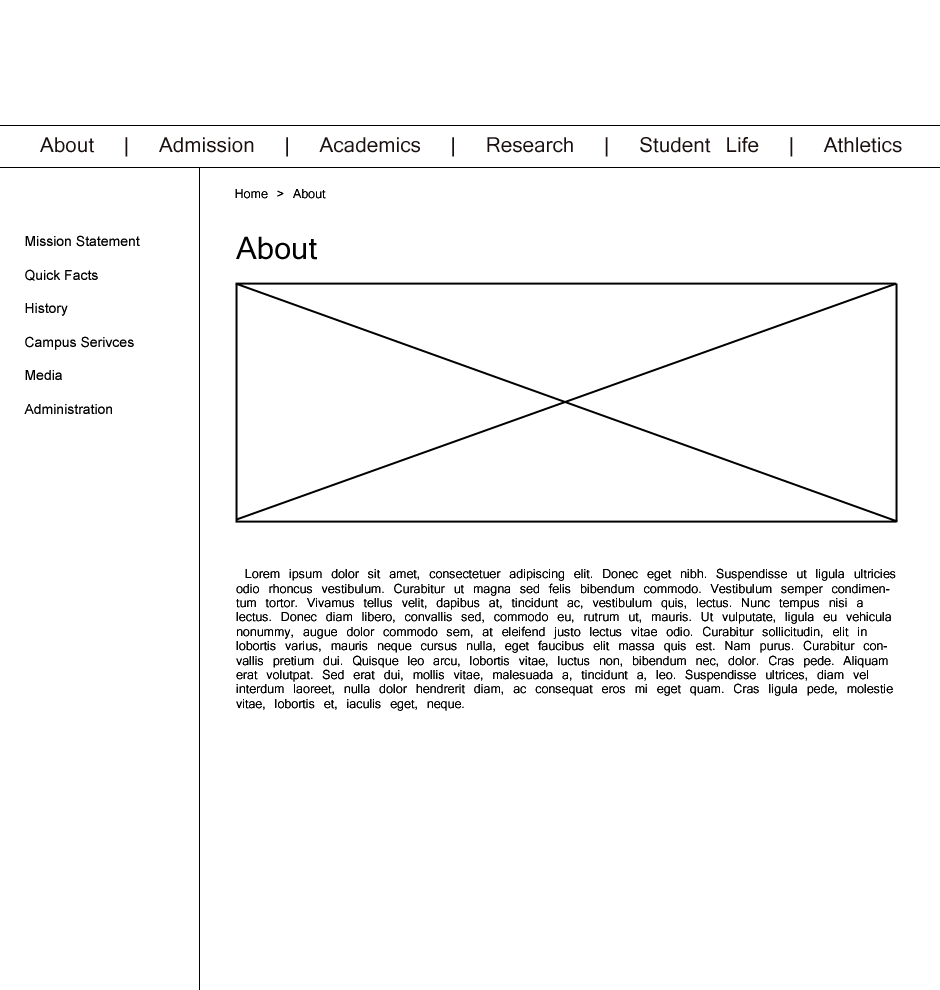
<style>
.page{position:relative;width:940px;height:990px;background:#ffffff}
.page>*{position:absolute;margin:0}
.t1{font:20px "Kartika";color:#1a1010}
.t2{font:12px "Kartika";color:#000000}
.t3{font:14px "ArialMT";color:#000000}
.t4{font:30px "Kartika";color:#000000}
</style>
<div class="page">
<p class="t1" style="left:40px;top:137px;width:862px;height:20px">About  |  Admission  |  Academics  |  Research  |  Student Life  |  Athletics</p>
<p class="t2" style="left:235px;top:189px;width:91px;height:10px">Home &gt; About</p>
<p class="t3" style="left:24px;top:235px;width:116px;height:179px">Mission Statement<br><br>Quick Facts<br><br>History<br><br>Campus Serivces<br><br>Media<br><br>Administration</p>
<p class="t4" style="left:236px;top:236px;width:81px;height:24px">About</p>
<p class="t2" style="left:236px;top:568px;width:660px;height:143px">Lorem ipsum dolor sit amet, consectetuer adipiscing elit. Donec eget nibh. Suspendisse ut ligula ultricies odio rhoncus vestibulum. Curabitur ut magna sed felis bibendum commodo. Vestibulum semper condimentum tortor. Vivamus tellus velit, dapibus at, tincidunt ac, vestibulum quis, lectus. Nunc tempus nisi a lectus. Donec diam libero, convallis sed, commodo eu, rutrum ut, mauris. Ut vulputate, ligula eu vehicula nonummy, augue dolor commodo sem, at eleifend justo lectus vitae odio. Curabitur sollicitudin, elit in lobortis varius, mauris neque cursus nulla, eget faucibus elit massa quis est. Nam purus. Curabitur convallis pretium dui. Quisque leo arcu, lobortis vitae, luctus non, bibendum nec, dolor. Cras pede. Aliquam erat volutpat. Sed erat dui, mollis vitae, malesuada a, tincidunt a, leo. Suspendisse ultrices, diam vel interdum laoreet, nulla dolor hendrerit diam, ac consequat eros mi eget quam. Cras ligula pede, molestie vitae, lobortis et, iaculis eget, neque.</p>
</div>
